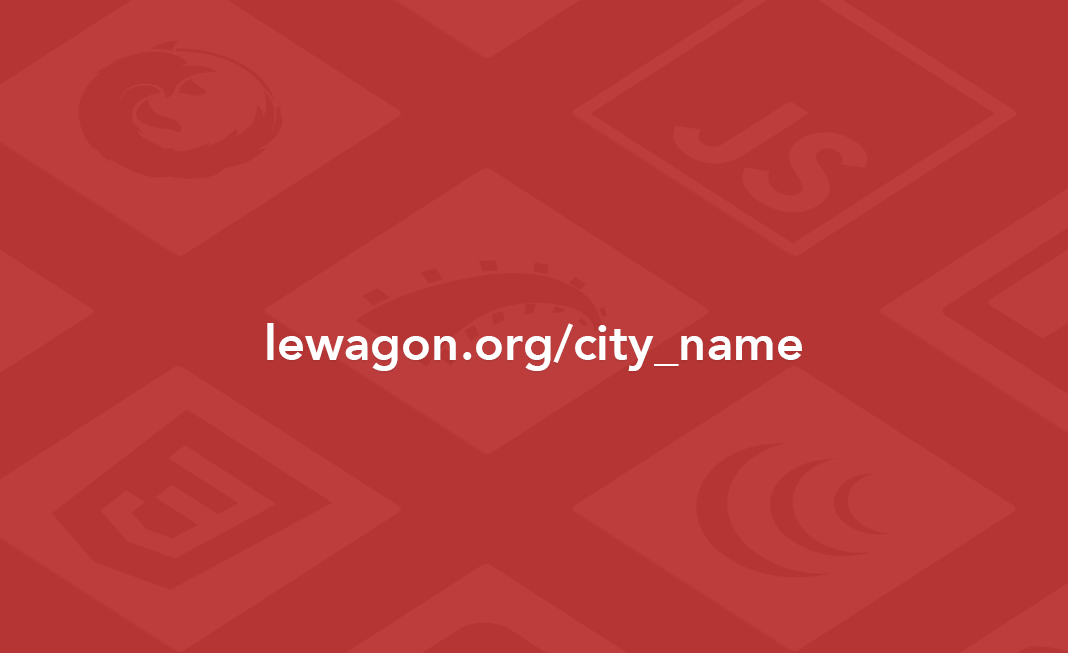
<style>
.page{position:relative;width:1068px;height:653px;background:#b53535}
.page>*{position:absolute;margin:0}
.t1{font:49.2px "Avenir-Heavy";color:#ffffff}
</style>
<div class="page">
<p class="t1" style="left:267px;top:323px;width:535px;height:48px">lewagon.org/city_name</p>
</div>
